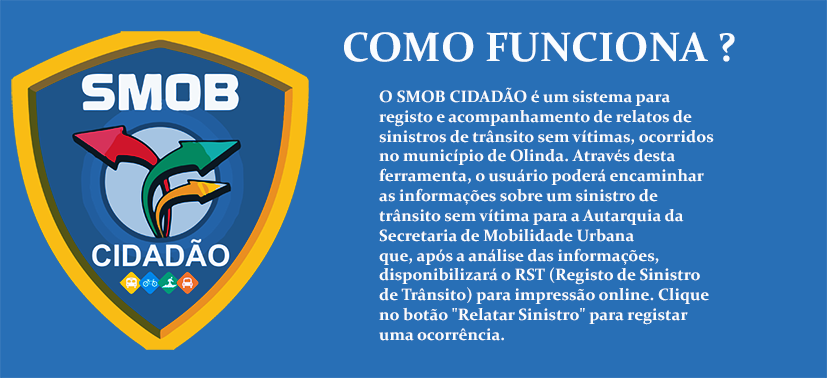
<style>
.page{position:relative;width:827px;height:378px;background:#286fb6}
.page>*{position:absolute;margin:0}
.t1{font:41.3px "Constantia-Bold";color:#fafbfc}
.t2{font:16.5px "Constantia-Bold";color:#fafbfc}
</style>
<div class="page">
<p class="t1" style="left:344px;top:32px;width:391px;height:30px">COMO FUNCIONA ?</p>
<p class="t2" style="left:379px;top:87px;width:335px;height:254px">O SMOB CIDADÃO é um sistema para<br>registo e acompanhamento de relatos de<br>sinistros de trânsito sem vítimas, ocorridos<br>no município de Olinda. Através desta<br>ferramenta, o usuário poderá encaminhar<br>as informações sobre um sinistro de<br>trânsito sem vítima para a Autarquia da<br>Secretaria de Mobilidade Urbana <br>que, após a análise das informações,<br>disponibilizará o RST (Registo de Sinistro<br>de Trânsito) para impressão online. Clique<br>no botão "Relatar Sinistro" para registar<br>uma ocorrência.</p>
</div>
